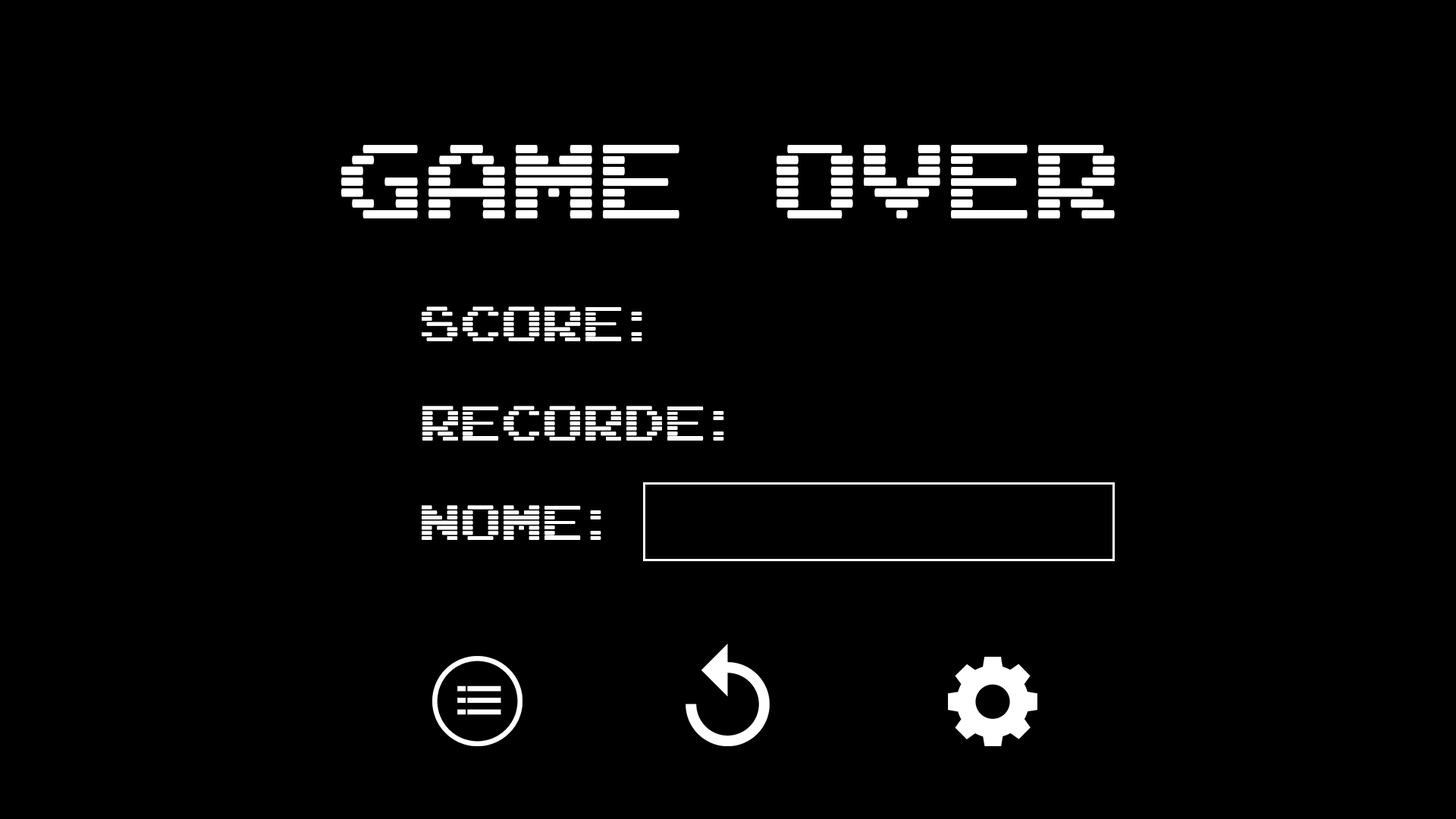
<style>
.page{position:relative;width:1456px;height:819px;background:#000000}
.page>*{position:absolute;margin:0}
.t1{font:88.9px "ArcadeInterlaced";color:#ffffff}
.t2{font:41.7px "ArcadeInterlaced";color:#ffffff}
</style>
<div class="page">
<p class="t1" style="left:341px;top:145px;width:774px;height:73px">Game OVER</p>
<p class="t2" style="left:422px;top:306px;width:220px;height:35px">SCORE:</p>
<p class="t2" style="left:422px;top:406px;width:302px;height:35px">Recorde:</p>
<p class="t2" style="left:422px;top:505px;width:179px;height:35px">NOME:</p>
</div>
